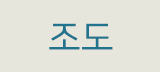
<style>
.page{position:relative;width:160px;height:72px;background:#e6e6dc}
.page>*{position:absolute;margin:0}
.t1{font:36px "NanumSquareR";color:#22738e}
</style>
<div class="page">
<p class="t1" style="left:49px;top:23px;width:64px;height:27px">조도</p>
</div>
